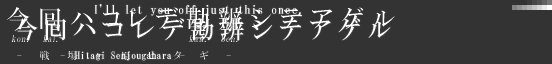
<style>
.page{position:relative;width:552px;height:64px;background:#333333}
.page>*{position:absolute;margin:0}
.t1{font:12px/12px "HGMinchoB";letter-spacing:0.075em;color:#ffffff}
.t2{font:24px/12px "HGMinchoB";letter-spacing:0.22em;color:#ffffff}
.t3{font:24px/12px "HGMinchoB";letter-spacing:0.26em;color:#ffffff}
.t4{font:10px "HGMinchoB";letter-spacing:0.01em;color:#ffffff}
</style>
<div class="page">
<p class="t1" style="left:14px;top:4px;width:377px;height:37px;text-align:center">I'll let you off just this once. <br><br><span class="t2">今囘ハコレ</span><span class="t3">デ</span><span class="t2">勘辨シテアゲル</span></p>
<p class="t4" style="left:75px;top:51px;width:96px;height:10px">Hitagi Senjougahara</p>
</div>
